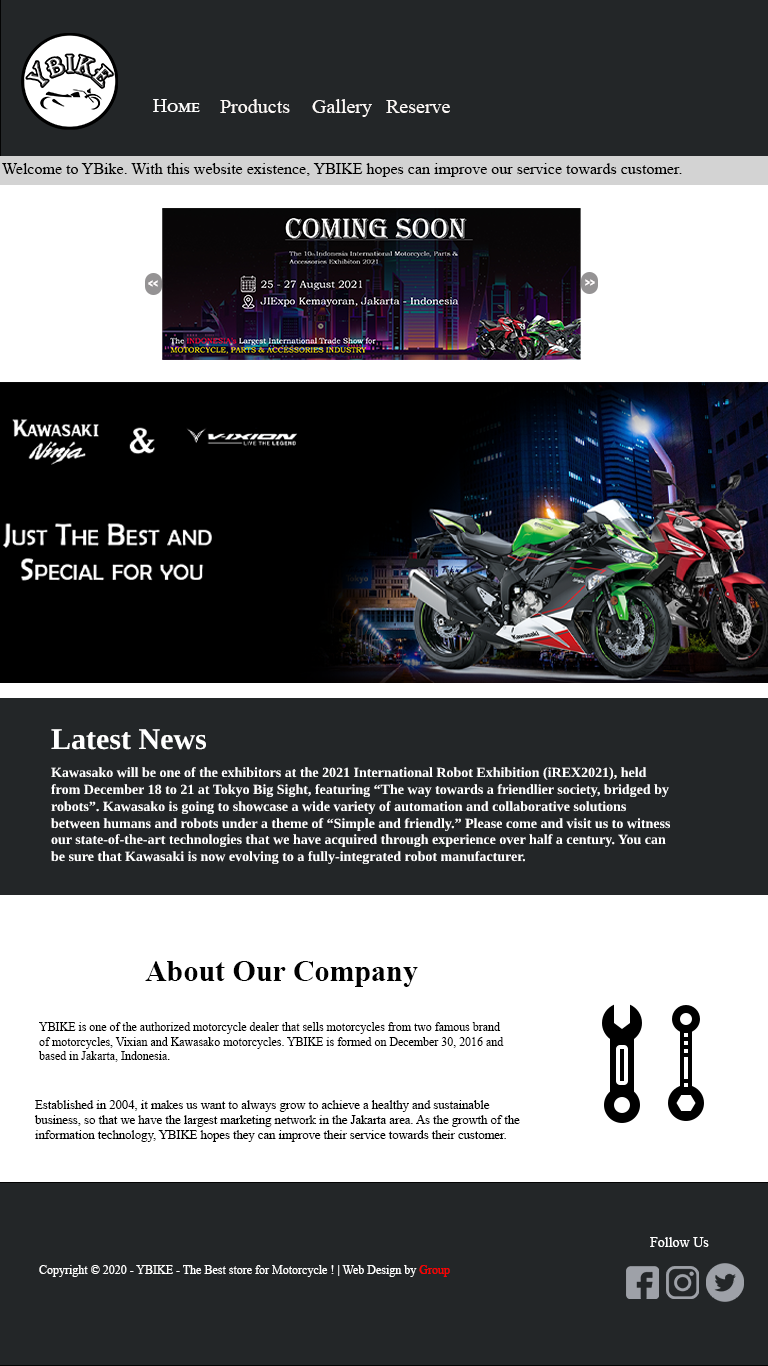
<style>
.page{position:relative;width:768px;height:1366px;background:#232628}
.page>*{position:absolute;margin:0}
.t1{font:20px "TimesNewRomanPSMT";color:#ffffff;font-variant:small-caps}
.t2{font:20px "TimesNewRomanPSMT";color:#fdf9f7}
.t3{font:16px "TimesNewRomanPSMT";color:#010101}
.t4{font:10px "Bauhaus93";color:#fffcfc}
.t5{font:30px "TimesNewRomanPS-BoldMT";color:#ffffff}
.t6{font:14px "TimesNewRomanPS-BoldMT";color:#ffffff}
.t7{font:30px "TimesNewRomanPS-BoldMT";color:#010101}
.t8{font:11.9px "TimesNewRomanPSMT";color:#010101}
.t9{font:12.6px "TimesNewRomanPSMT";color:#010101}
.t10{font:14px "TimesNewRomanPSMT";color:#ffffff}
.t11{font:12px "TimesNewRomanPSMT";color:#ffffff}
.t12{font:12px "TimesNewRomanPSMT";color:#ff0000}
</style>
<div class="page">
<p class="t1" style="left:153px;top:99px;width:47px;height:13px">Home</p>
<p class="t2" style="left:220px;top:99px;width:70px;height:14px">Products</p>
<p class="t2" style="left:312px;top:99px;width:60px;height:18px">Gallery</p>
<p class="t2" style="left:386px;top:100px;width:64px;height:13px">Reserve</p>
<p class="t3" style="left:2px;top:163px;width:680px;height:14px">Welcome to YBike. With this website existence, YBIKE hopes can improve our service towards customer.</p>
<p class="t4" style="left:148px;top:280px;width:10px;height:7px">&lt;&lt;</p>
<p class="t4" style="left:585px;top:279px;width:10px;height:7px">&gt;&gt;</p>
<p class="t5" style="left:51px;top:729px;width:156px;height:21px">Latest News</p>
<p class="t6" style="left:51px;top:767px;width:620px;height:98px">Kawasako will be one of the exhibitors at the 2021 International Robot Exhibition (iREX2021), held from December 18 to 21 at Tokyo Big Sight, featuring “The way towards a friendlier society, bridged by robots”. Kawasako is going to showcase a wide variety of automation and collaborative solutions between humans and robots under a theme of “Simple and friendly.” Please come and visit us to witness our state-of-the-art technologies that we have acquired through experience over half a century. You can be sure that Kawasaki is now evolving to a fully-integrated robot manufacturer.</p>
<p class="t7" style="left:145px;top:961px;width:273px;height:26px">About Our Company</p>
<p class="t8" style="left:38px;top:1022px;width:466px;height:40px">YBIKE is one of the authorized motorcycle dealer that sells motorcycles from two famous brand <br>of motorcycles, Vixian and Kawasako motorcycles. YBIKE is formed on December 30, 2016 and <br>based in Jakarta, Indonesia.</p>
<p class="t9" style="left:34px;top:1100px;width:486px;height:42px">Established in 2004, it makes us want to always grow to achieve a healthy and sustainable <br>business, so that we have the largest marketing network in the Jakarta area. As the growth of the <br>information technology, YBIKE hopes they can improve their service towards their customer.</p>
<p class="t10" style="left:650px;top:1237px;width:59px;height:10px">Follow Us</p>
<p class="t11" style="left:39px;top:1265px;width:411px;height:12px">Copyright © 2020 - YBIKE - The Best store for Motorcycle ! | Web Design by <span class="t12">Group</span></p>
</div>
